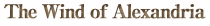
<style>
.page{position:relative;width:210px;height:26px;background:#ffffff}
.page>*{position:absolute;margin:0}
.t1{font:19px "RyuminPro-ExBold";letter-spacing:-0.08em;color:#6b573f;font-weight:bold}
</style>
<div class="page">
<p class="t1" style="left:4px;top:4px;width:202px;height:15px">The Wind of Alexandria</p>
</div>
